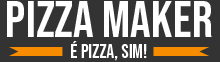
<style>
.page{position:relative;width:220px;height:62px;background:#333333}
.page>*{position:absolute;margin:0}
.t1{font:52px "BebasNeue-Regular";color:#ffffff}
.t2{font:19.7px "BebasNeue-Regular";color:#ffffff}
</style>
<div class="page">
<p class="t1" style="left:7px;top:1px;width:205px;height:36px">PIZZA MAKER</p>
<p class="t2" style="left:71px;top:41px;width:76px;height:20px">é pizza, sim!</p>
</div>
